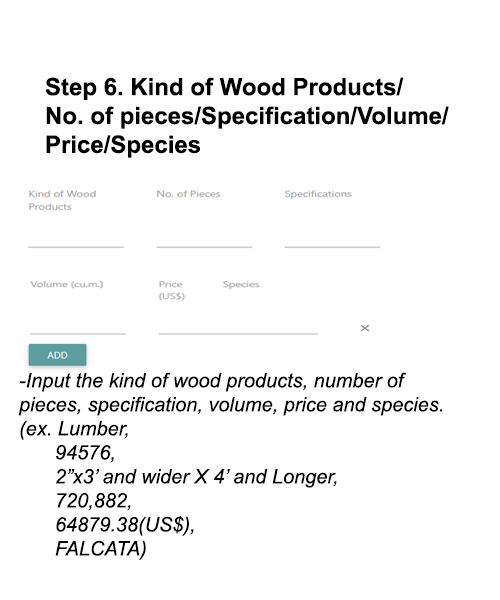
<style>
.page{position:relative;width:500px;height:600px;background:#ffffff}
.page>*{position:absolute;margin:0}
.t1{font:24px "Arial-BoldMT";color:#000000}
.t2{font:20px "Arial-ItalicMT";color:#000000}
</style>
<div class="page">
<p class="t1" style="left:45px;top:77px;width:404px;height:81px">Step 6. Kind of Wood Products/<br>No. of pieces/Specification/Volume/<br>Price/Species</p>
<p class="t2" style="left:18px;top:372px;width:425px;height:188px">-Input the kind of wood products, number of pieces, specification, volume, price and species.<br>(ex. Lumber,<br> 94576,<br> 2”x3’ and wider X 4’ and Longer,<br> 720,882,<br> 64879.38(US$),<br> FALCATA)</p>
</div>
